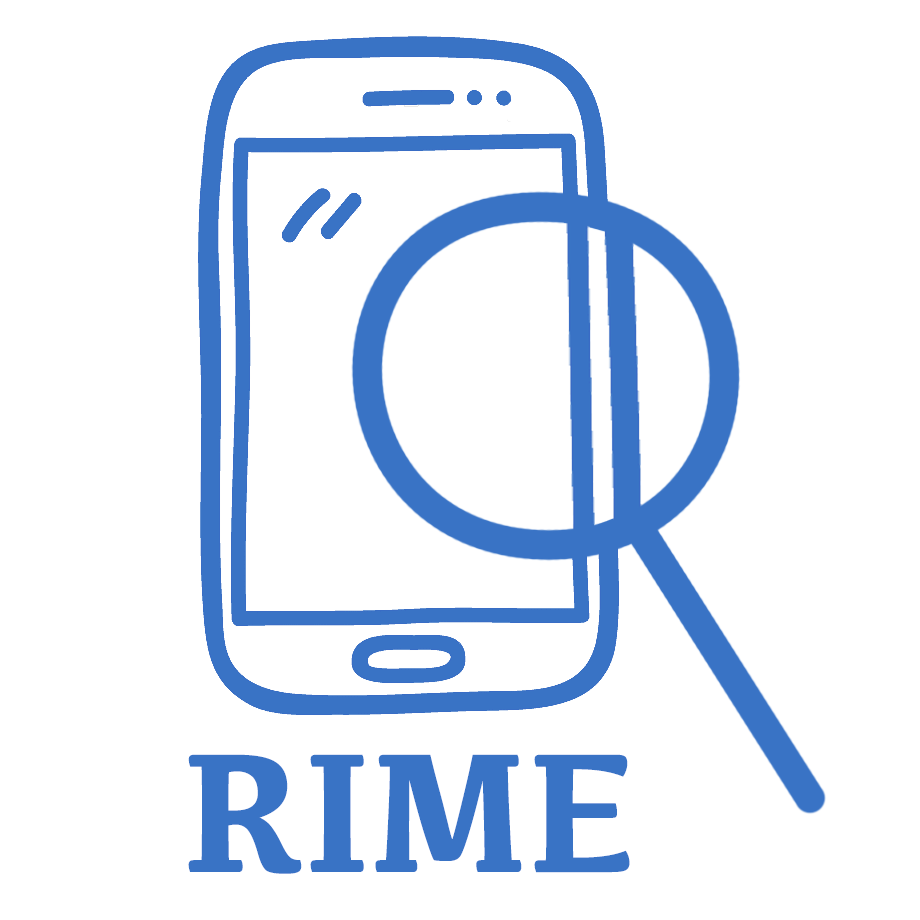
<style>
.page{position:relative;width:920px;height:920px;background:#ffffff}
.page>*{position:absolute;margin:0}
.t1{font:175.7px "Kefa-Bold";color:#3973c5}
</style>
<div class="page">
<p class="t1" style="left:188px;top:754px;width:442px;height:120px">RIME</p>
</div>
